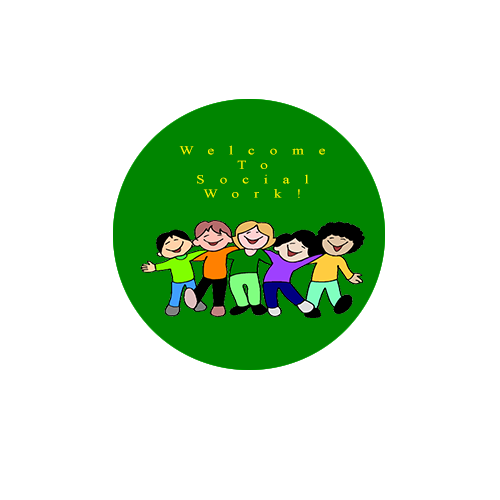
<style>
.page{position:relative;width:500px;height:500px;background:#ffffff}
.page>*{position:absolute;margin:0}
.t1{font:12px "TimesNewRomanPSMT";letter-spacing:0.985em;color:#fffc00;scale:1.26 1}
</style>
<div class="page">
<p class="t1" style="left:179px;top:145px;width:146px;height:53px;text-align:center">Welcome<br>To<br>Social Work!</p>
</div>
